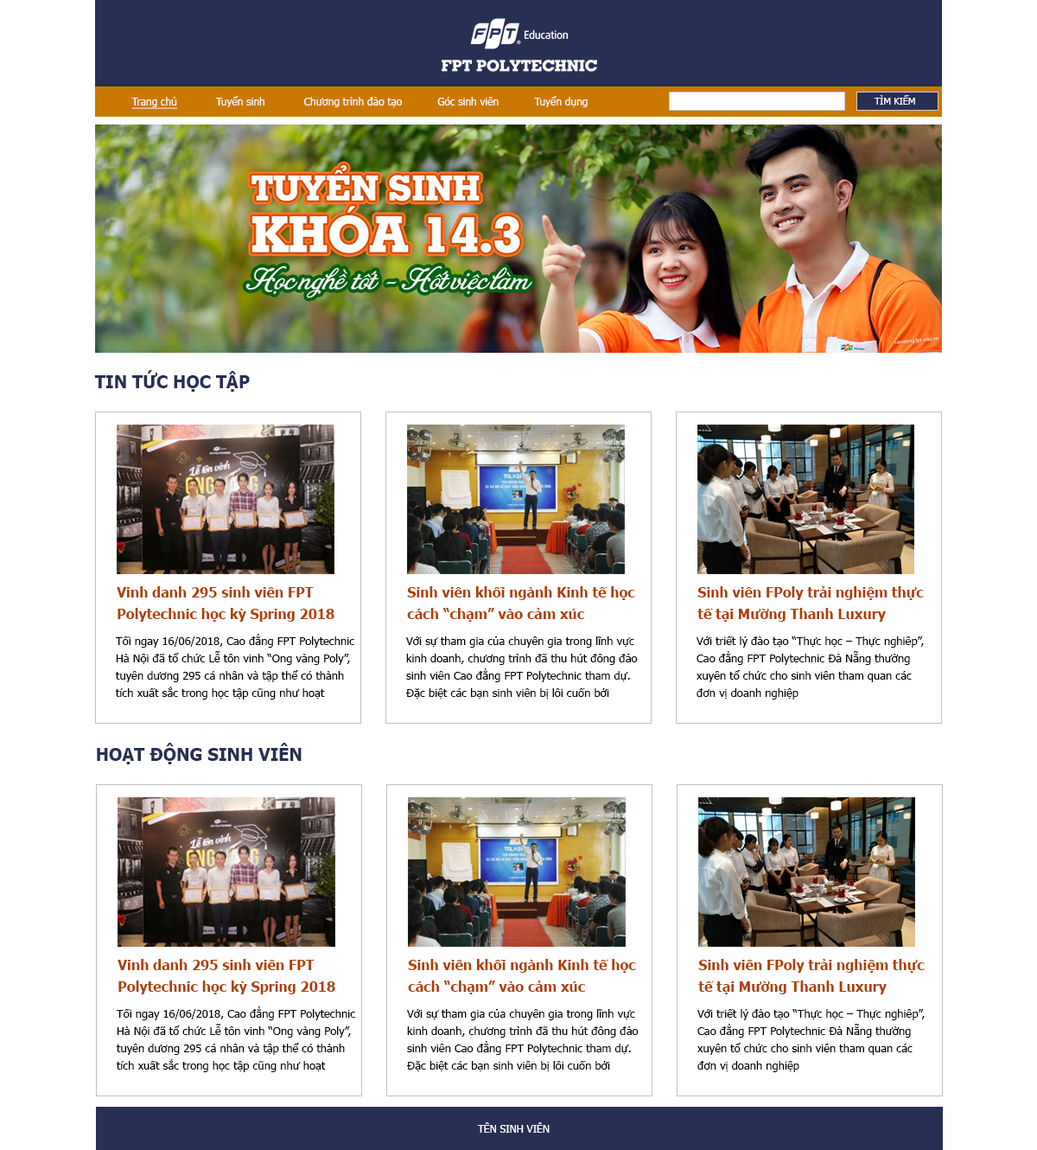
<style>
.page{position:relative;width:1037px;height:1150px;background:#ffffff}
.page>*{position:absolute;margin:0}
.t1{font:10.4px "Tahoma";color:#fefbfb}
.t2{font:10.4px "Tahoma";color:#fefbfb;text-decoration:underline}
.t3{font:9.5px "Tahoma";color:#fefbfb}
.t4{font:17.3px "Tahoma-Bold";color:#272f54}
.t5{font:13.8px/21.6px "Tahoma-Bold";color:#ad3f00}
.t6{font:11.2px/17.3px "Tahoma";color:#000000}
.t7{font:10.4px "Tahoma";color:#ffffff}
</style>
<div class="page">
<p class="t1" style="left:131px;top:96px;width:457px;height:13px"><span class="t2">Trang chủ</span>            Tuyển sinh            Chương trình đào tạo           Góc sinh viên           Tuyển dụng</p>
<p class="t3" style="left:874px;top:95px;width:41px;height:10px">TÌM KIẾM</p>
<p class="t4" style="left:94px;top:370px;width:156px;height:22px">TIN TỨC HỌC TẬP</p>
<p class="t5" style="left:117px;top:586px;width:218px;height:35px">Vinh danh 295 sinh viên FPT <br>Polytechnic học kỳ Spring 2018</p>
<p class="t5" style="left:407px;top:586px;width:228px;height:35px">Sinh viên khối ngành Kinh tế học <br>cách “chạm” vào cảm xúc</p>
<p class="t5" style="left:698px;top:586px;width:226px;height:35px">Sinh viên FPoly trải nghiệm thực <br>tế tại Mường Thanh Luxury</p>
<p class="t6" style="left:115px;top:634px;width:240px;height:65px">Tối ngày 16/06/2018, Cao đẳng FPT Polytechnic<br>Hà Nội đã tổ chức Lễ tôn vinh “Ong vàng Poly”, <br>tuyên dương 295 cá nhân và tập thể có thành <br>tích xuất sắc trong học tập cũng như hoạt</p>
<p class="t6" style="left:405px;top:636px;width:233px;height:62px">Với sự tham gia của chuyên gia trong lĩnh vực <br>kinh doanh, chương trình đã thu hút đông đảo <br>sinh viên Cao đẳng FPT Polytechnic tham dự. <br>Đặc biệt các bạn sinh viên bị lôi cuốn bởi</p>
<p class="t6" style="left:696px;top:636px;width:228px;height:63px">Với triết lý đào tạo “Thực học – Thực nghiêp”, <br>Cao đẳng FPT Polytechnic Đà Nẵng thường <br>xuyên tổ chức cho sinh viên tham quan các <br>đơn vị doanh nghiệp</p>
<p class="t4" style="left:97px;top:742px;width:205px;height:22px">HOẠT ĐỘNG SINH VIÊN</p>
<p class="t5" style="left:118px;top:959px;width:217px;height:35px">Vinh danh 295 sinh viên FPT <br>Polytechnic học kỳ Spring 2018</p>
<p class="t5" style="left:408px;top:959px;width:228px;height:35px">Sinh viên khối ngành Kinh tế học <br>cách “chạm” vào cảm xúc</p>
<p class="t5" style="left:698px;top:959px;width:227px;height:35px">Sinh viên FPoly trải nghiệm thực <br>tế tại Mường Thanh Luxury</p>
<p class="t6" style="left:116px;top:1006px;width:240px;height:66px">Tối ngày 16/06/2018, Cao đẳng FPT Polytechnic<br>Hà Nội đã tổ chức Lễ tôn vinh “Ong vàng Poly”, <br>tuyên dương 295 cá nhân và tập thể có thành <br>tích xuất sắc trong học tập cũng như hoạt</p>
<p class="t6" style="left:406px;top:1009px;width:233px;height:62px">Với sự tham gia của chuyên gia trong lĩnh vực <br>kinh doanh, chương trình đã thu hút đông đảo <br>sinh viên Cao đẳng FPT Polytechnic tham dự. <br>Đặc biệt các bạn sinh viên bị lôi cuốn bởi</p>
<p class="t6" style="left:697px;top:1009px;width:228px;height:63px">Với triết lý đào tạo “Thực học – Thực nghiêp”, <br>Cao đẳng FPT Polytechnic Đà Nẵng thường <br>xuyên tổ chức cho sinh viên tham quan các <br>đơn vị doanh nghiệp</p>
<p class="t7" style="left:477px;top:1122px;width:73px;height:10px">TÊN SINH VIÊN</p>
</div>
